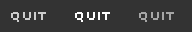
<style>
.page{position:relative;width:192px;height:32px;background:#333333}
.page>*{position:absolute;margin:0}
.t1{font:12.7px "Uni0554";color:#cdcdcd}
.t2{font:12.7px "Uni0554";color:#ffffff}
.t3{font:12.7px "Uni0554";color:#a5a5a5}
</style>
<div class="page">
<p class="t1" style="left:11px;top:12px;width:35px;height:10px">QUIT</p>
<p class="t2" style="left:75px;top:12px;width:35px;height:10px">QUIT</p>
<p class="t3" style="left:139px;top:12px;width:35px;height:10px">QUIT</p>
</div>
